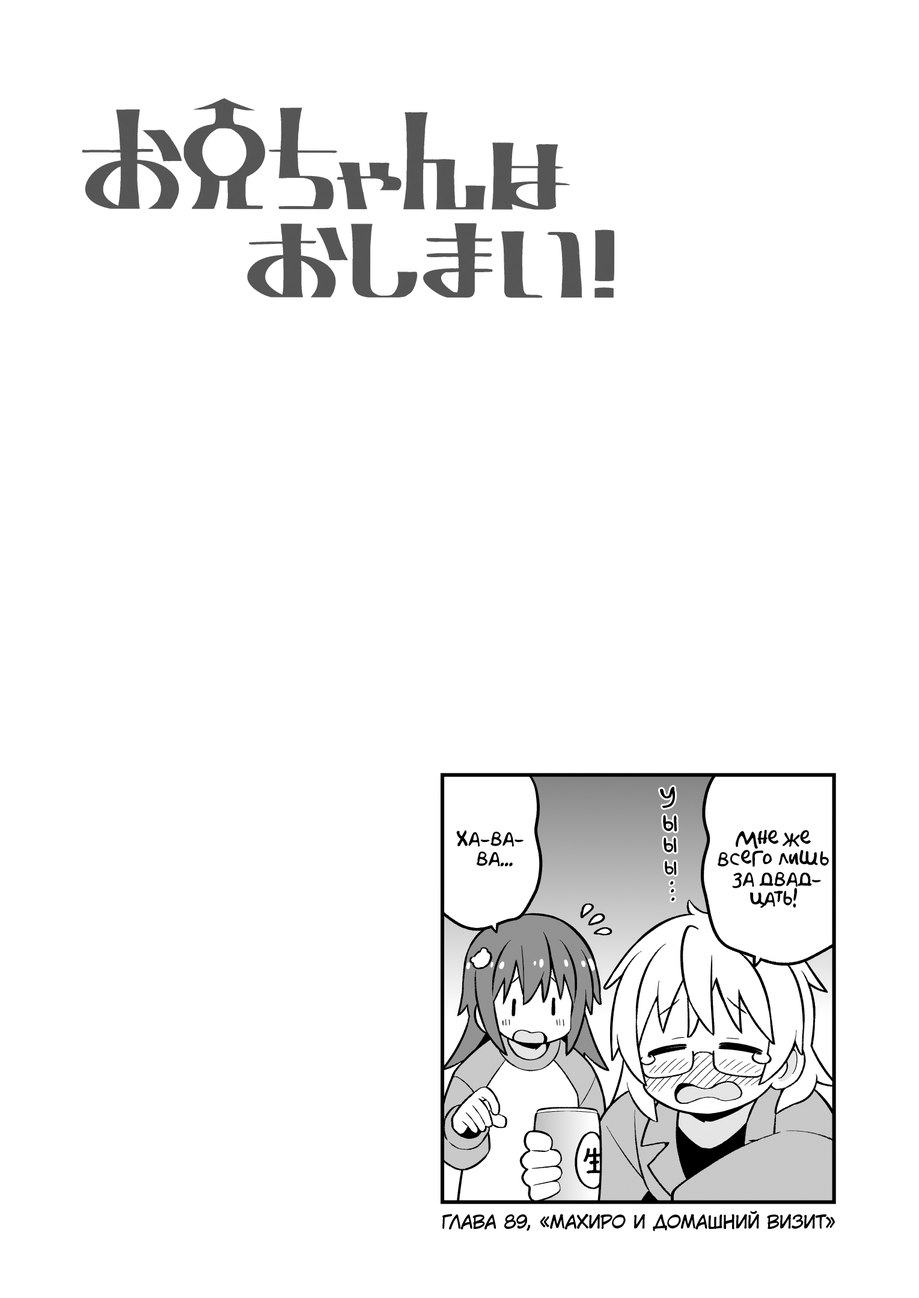
<style>
.page{position:relative;width:919px;height:1298px;background:#ffffff}
.page>*{position:absolute;margin:0}
.t1{font:25.2px "AkbarPlain";color:#000000}
.t2{font:23.4px "AkbarPlain";color:#000000}
.t3{font:19.8px "AkbarPlain";color:#000000}
.t4{font:21.6px "AkbarPlain";color:#000000}
.t5{font:18px "AkbarPlain";color:#000000}
.t6{font:18px "KuraiVoice2";color:#000000;text-transform:uppercase}
</style>
<div class="page">
<p class="t1" style="left:660px;top:787px;width:15px;height:21px;rotate:-6deg">у</p>
<p class="t2" style="left:663px;top:815px;width:14px;height:17px;rotate:-7deg">ы</p>
<p class="t3" style="left:456px;top:830px;width:68px;height:36px;text-align:center">Ха-ва-<br>ва...</p>
<p class="t3" style="left:717px;top:830px;width:112px;height:78px;text-align:center">Мне же<br>всего лишь<br>за двад-<br>цать!</p>
<p class="t4" style="left:663px;top:837px;width:14px;height:16px;rotate:-8deg">ы</p>
<p class="t3" style="left:665px;top:861px;width:12px;height:14px;rotate:-7deg">ы</p>
<p class="t5" style="left:670px;top:881px;width:4px;height:3px">.</p>
<p class="t5" style="left:671px;top:889px;width:3px;height:3px">.</p>
<p class="t5" style="left:671px;top:897px;width:4px;height:4px">.</p>
<p class="t6" style="left:442px;top:1210px;width:393px;height:21px">Глава 89, «Махиро и домашний визит»</p>
</div>
